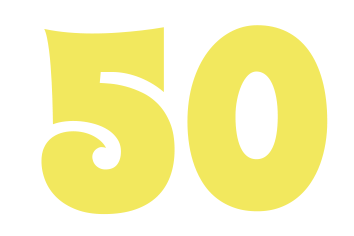
<style>
.page{position:relative;width:354px;height:236px;background:#ffffff}
.page>*{position:absolute;margin:0}
.t1{font:250px "SpicyRice-Regular";color:#f2e85e}
</style>
<div class="page">
<p class="t1" style="left:41px;top:25px;width:287px;height:190px">50</p>
</div>
